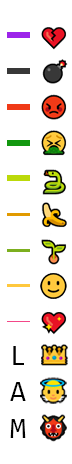
<style>
.page{position:relative;width:72px;height:464px;background:#ffffff}
.page>*{position:absolute;margin:0}
.t1{font:29.2px "Consolas";color:#000000}
</style>
<div class="page">
<p class="t1" style="left:13px;top:346px;width:11px;height:19px">L</p>
<p class="t1" style="left:10px;top:382px;width:16px;height:19px">A</p>
<p class="t1" style="left:10px;top:419px;width:16px;height:19px">M</p>
</div>
